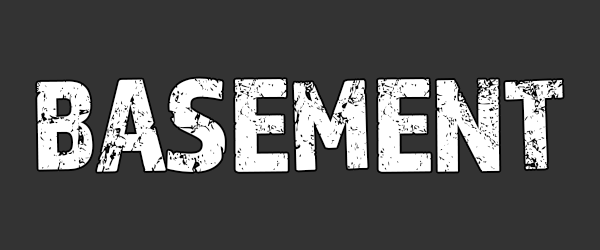
<style>
.page{position:relative;width:600px;height:250px;background:#333333}
.page>*{position:absolute;margin:0}
.t1{font:134px "Almaq-Rough";color:#ffffff;scale:0.95 1}
</style>
<div class="page">
<p class="t1" style="left:37px;top:78px;width:526px;height:94px">BASEMENT</p>
</div>
